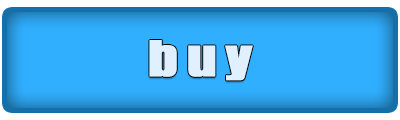
<style>
.page{position:relative;width:400px;height:120px;background:#30afff}
.page>*{position:absolute;margin:0}
.t1{font:41.7px "Anton";letter-spacing:0.125em;color:#e0f0ff;font-weight:bold;scale:1.41 1}
</style>
<div class="page">
<p class="t1" style="left:149px;top:40px;width:104px;height:41px">buy</p>
</div>
